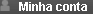
<style>
.page{position:relative;width:93px;height:14px;background:#ffffff}
.page>*{position:absolute;margin:0}
.t1{font:12px "Arial-BoldMT";color:#fefefe}
</style>
<div class="page">
<p class="t1" style="left:19px;top:2px;width:68px;height:9px">Minha conta</p>
</div>
